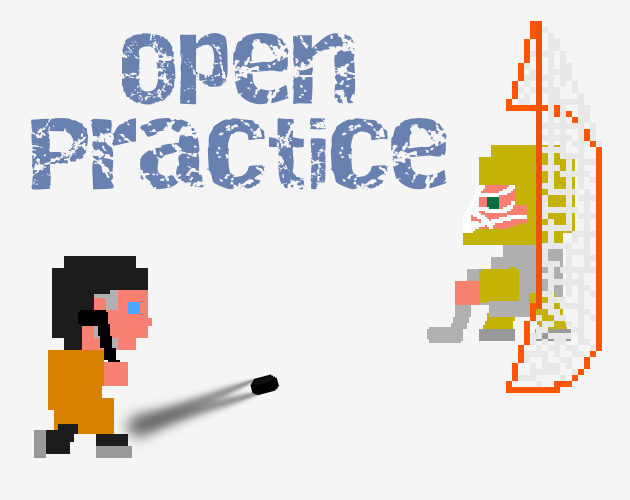
<style>
.page{position:relative;width:630px;height:500px;background:#f5f5f5}
.page>*{position:absolute;margin:0}
.t1{font:71px "Destroy";color:#6981b0}
</style>
<div class="page">
<p class="t1" style="left:30px;top:33px;width:417px;height:157px;text-align:center">Open<br>Practice</p>
</div>
